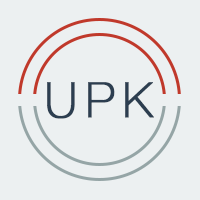
<style>
.page{position:relative;width:200px;height:200px;background:#ecf0f1}
.page>*{position:absolute;margin:0}
.t1{font:48px "HelveticaNeueLTPro-Th";letter-spacing:0.15em;color:#2c3e50;text-transform:uppercase;font-weight:bold}
</style>
<div class="page">
<p class="t1" style="left:47px;top:82px;width:107px;height:37px">UPK</p>
</div>
